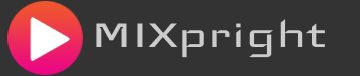
<style>
.page{position:relative;width:360px;height:76px;background:#333333}
.page>*{position:absolute;margin:0}
.t1{font:48px "Iceland-Regular";color:#cccccc;scale:1.28 1}
</style>
<div class="page">
<p class="t1" style="left:96px;top:19px;width:229px;height:39px">MIXpright</p>
</div>
